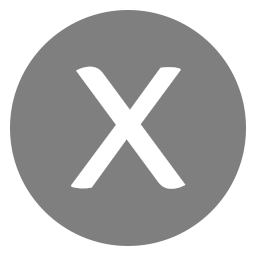
<style>
.page{position:relative;width:256px;height:256px;background:#7f7f7f}
.page>*{position:absolute;margin:0}
.t1{font:175px "Signika-Regular";color:#ffffff;font-weight:bold;scale:1.2 1}
</style>
<div class="page">
<p class="t1" style="left:71px;top:66px;width:115px;height:123px">X</p>
</div>
